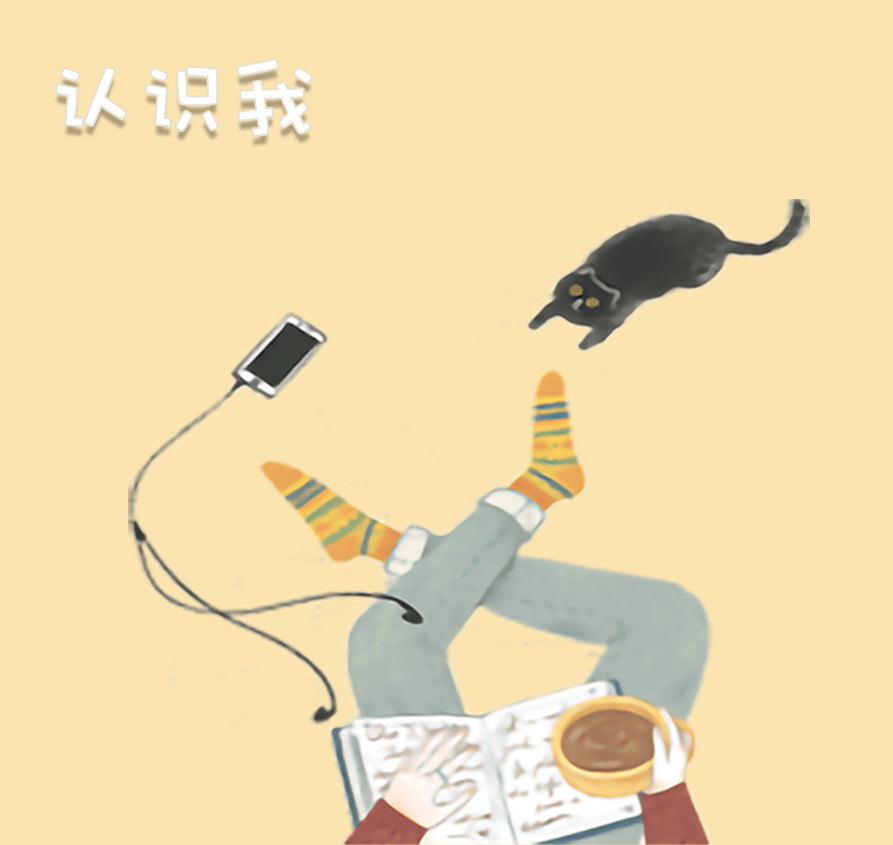
<style>
.page{position:relative;width:893px;height:845px;background:#fbe4b0}
.page>*{position:absolute;margin:0}
.t1{font:95.1px "DFPWaWaW5";letter-spacing:-0.05em;color:#ffffff;text-transform:uppercase;font-weight:bold;scale:0.97 1}
</style>
<div class="page">
<p class="t1" style="left:57px;top:60px;width:255px;height:75px">认识我</p>
</div>
